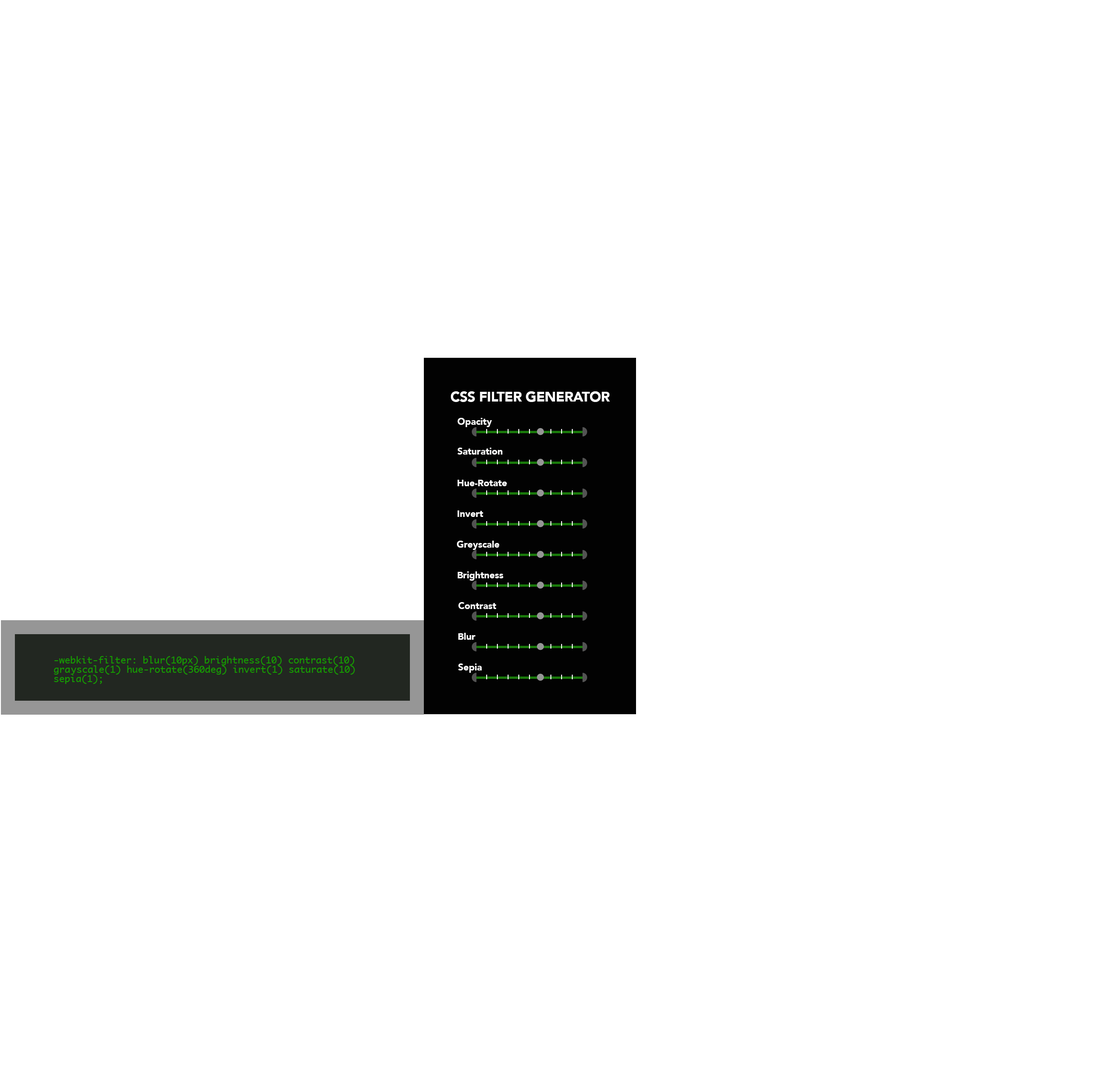
<style>
.page{position:relative;width:1112px;height:1072px;background:#ffffff}
.page>*{position:absolute;margin:0}
.t1{font:14px "Avenir-Black";letter-spacing:-0.02em;color:#ffffff}
.t2{font:9.3px "Avenir-Black";color:#ffffff}
.t3{font:9.3px/6.5px "Monaco";color:#159b00}
</style>
<div class="page">
<p class="t1" style="left:451px;top:391px;width:159px;height:11px">CSS FILTER GENERATOR</p>
<p class="t2" style="left:457px;top:418px;width:35px;height:9px">Opacity</p>
<p class="t2" style="left:457px;top:448px;width:46px;height:7px">Saturation</p>
<p class="t2" style="left:457px;top:480px;width:50px;height:6px">Hue-Rotate</p>
<p class="t2" style="left:457px;top:510px;width:26px;height:7px">Invert</p>
<p class="t2" style="left:457px;top:541px;width:42px;height:9px">Greyscale</p>
<p class="t2" style="left:457px;top:571px;width:47px;height:10px">Brightness</p>
<p class="t2" style="left:458px;top:602px;width:39px;height:7px">Contrast</p>
<p class="t2" style="left:458px;top:633px;width:18px;height:7px">Blur</p>
<p class="t3" style="left:54px;top:656px;width:301px;height:28px">-webkit-filter: blur(10px) brightness(10) contrast(10) <br>grayscale(1) hue-rotate(360deg) invert(1) saturate(10) <br>sepia(1);</p>
<p class="t2" style="left:458px;top:664px;width:24px;height:9px">Sepia</p>
</div>
